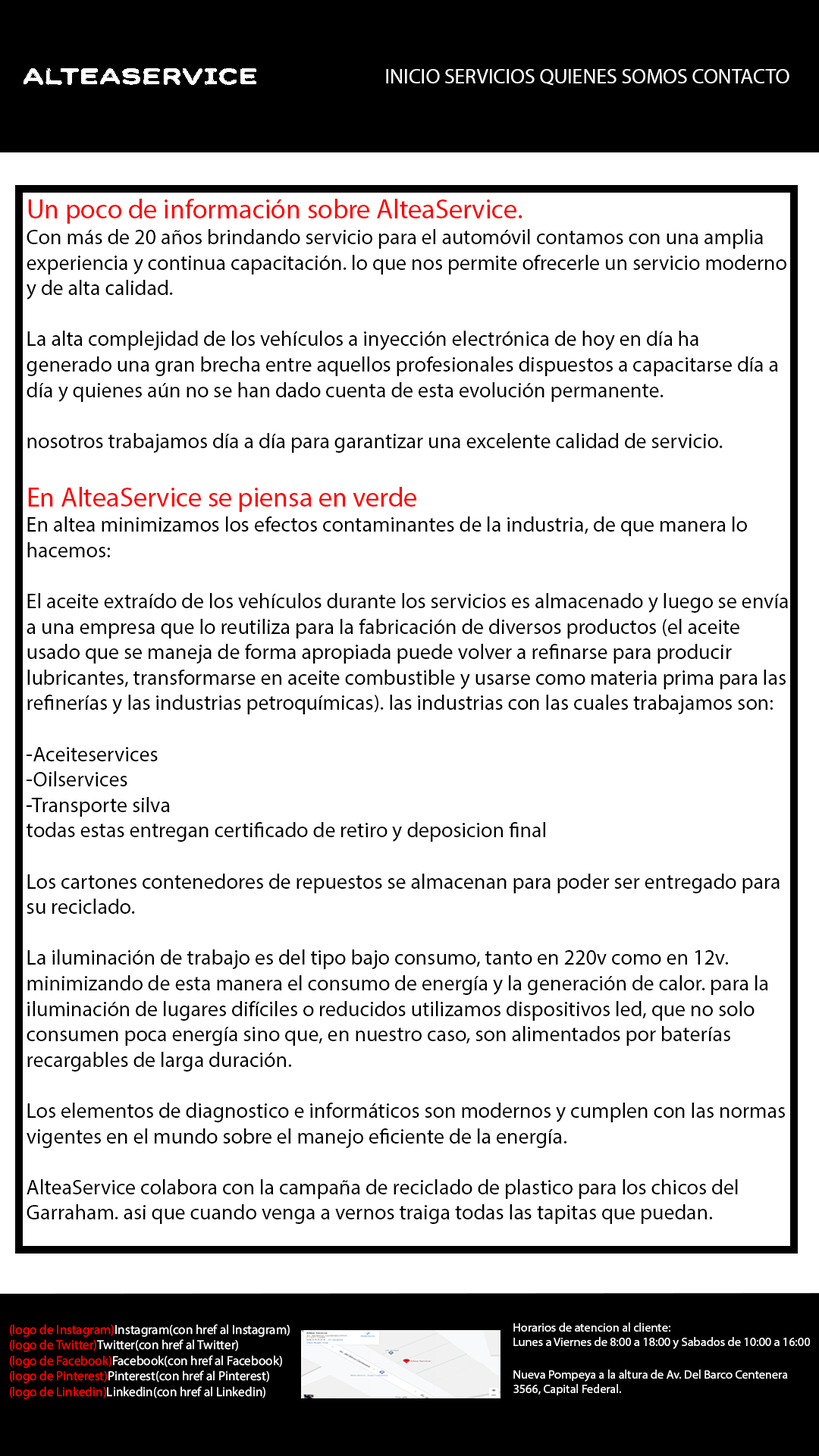
<style>
.page{position:relative;width:819px;height:1456px;background:#ffffff}
.page>*{position:absolute;margin:0}
.t1{font:20.9px "MyriadPro-Regular";color:#ffffff}
.t2{font:21.2px "MyriadPro-Regular";color:#000000}
.t3{font:27.3px "MyriadPro-Regular";color:#ff0000}
.t4{font:13px "MyriadPro-Regular";color:#ffffff}
.t5{font:13px "MyriadPro-Regular";color:#ff0000}
.t6{font:12.3px "MyriadPro-Regular";color:#ffffff}
</style>
<div class="page">
<p class="t1" style="left:386px;top:69px;width:403px;height:17px">INICIO SERVICIOS QUIENES SOMOS CONTACTO</p>
<p class="t2" style="left:27px;top:199px;width:761px;height:1025px"><span class="t3">Un poco de información sobre AlteaService.<br></span>Con más de 20 años brindando servicio para el automóvil contamos con una amplia experiencia y continua capacitación. lo que nos permite ofrecerle un servicio moderno y de alta calidad.<br><br>La alta complejidad de los vehículos a inyección electrónica de hoy en día ha generado una gran brecha entre aquellos profesionales dispuestos a capacitarse día a día y quienes aún no se han dado cuenta de esta evolución permanente.<br><br>nosotros trabajamos día a día para garantizar una excelente calidad de servicio.<br><br><span class="t3">En AlteaService se piensa en verde<br></span>En altea minimizamos los efectos contaminantes de la industria, de que manera lo hacemos:<br><br>El aceite extraído de los vehículos durante los servicios es almacenado y luego se envía a una empresa que lo reutiliza para la fabricación de diversos productos (el aceite usado que se maneja de forma apropiada puede volver a refinarse para producir lubricantes, transformarse en aceite combustible y usarse como materia prima para las refinerías y las industrias petroquímicas). las industrias con las cuales trabajamos son:<br><br>-Aceiteservices<br>-Oilservices<br>-Transporte silva<br>todas estas entregan certificado de retiro y deposicion final<br><br>Los cartones contenedores de repuestos se almacenan para poder ser entregado para su reciclado.<br><br>La iluminación de trabajo es del tipo bajo consumo, tanto en 220v como en 12v. minimizando de esta manera el consumo de energía y la generación de calor. para la iluminación de lugares difíciles o reducidos utilizamos dispositivos led, que no solo consumen poca energía sino que, en nuestro caso, son alimentados por baterías recargables de larga duración.<br><br>Los elementos de diagnostico e informáticos son modernos y cumplen con las normas vigentes en el mundo sobre el manejo eficiente de la energía.<br><br>AlteaService colabora con la campaña de reciclado de plastico para los chicos del Garraham. asi que cuando venga a vernos traiga todas las tapitas que puedan.</p>
<p class="t4" style="left:10px;top:1324px;width:280px;height:75px"><span class="t5">(logo de Instagram)</span>Instagram(con href al Instagram)<br><span class="t5">(logo de Twitter)</span>Twitter(con href al Twitter)<br><span class="t5">(logo de Facebook)</span>Facebook(con href al Facebook)<br><span class="t5">(logo de Pinterest)</span>Pinterest(con href al Pinterest)<br><span class="t5">(logo de Linkedin)</span>Linkedin(con href al Linkedin)</p>
<p class="t6" style="left:513px;top:1323px;width:297px;height:26px">Horarios de atencion al cliente:<br>Lunes a Viernes de 8:00 a 18:00 y Sabados de 10:00 a 16:00</p>
<p class="t6" style="left:513px;top:1370px;width:275px;height:25px">Nueva Pompeya a la altura de Av. Del Barco Centenera 3566, Capital Federal.</p>
</div>
